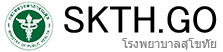
<style>
.page{position:relative;width:223px;height:52px;background:#ffffff}
.page>*{position:absolute;margin:0}
.t1{font:39px "MS-PGothic";color:#000000}
.t2{font:12px "Tahoma";color:#868585}
</style>
<div class="page">
<p class="t1" style="left:64px;top:6px;width:153px;height:27px">SKTH.GO</p>
<p class="t2" style="left:122px;top:38px;width:95px;height:12px">โรงพยาบาลสุโขทัย</p>
</div>
